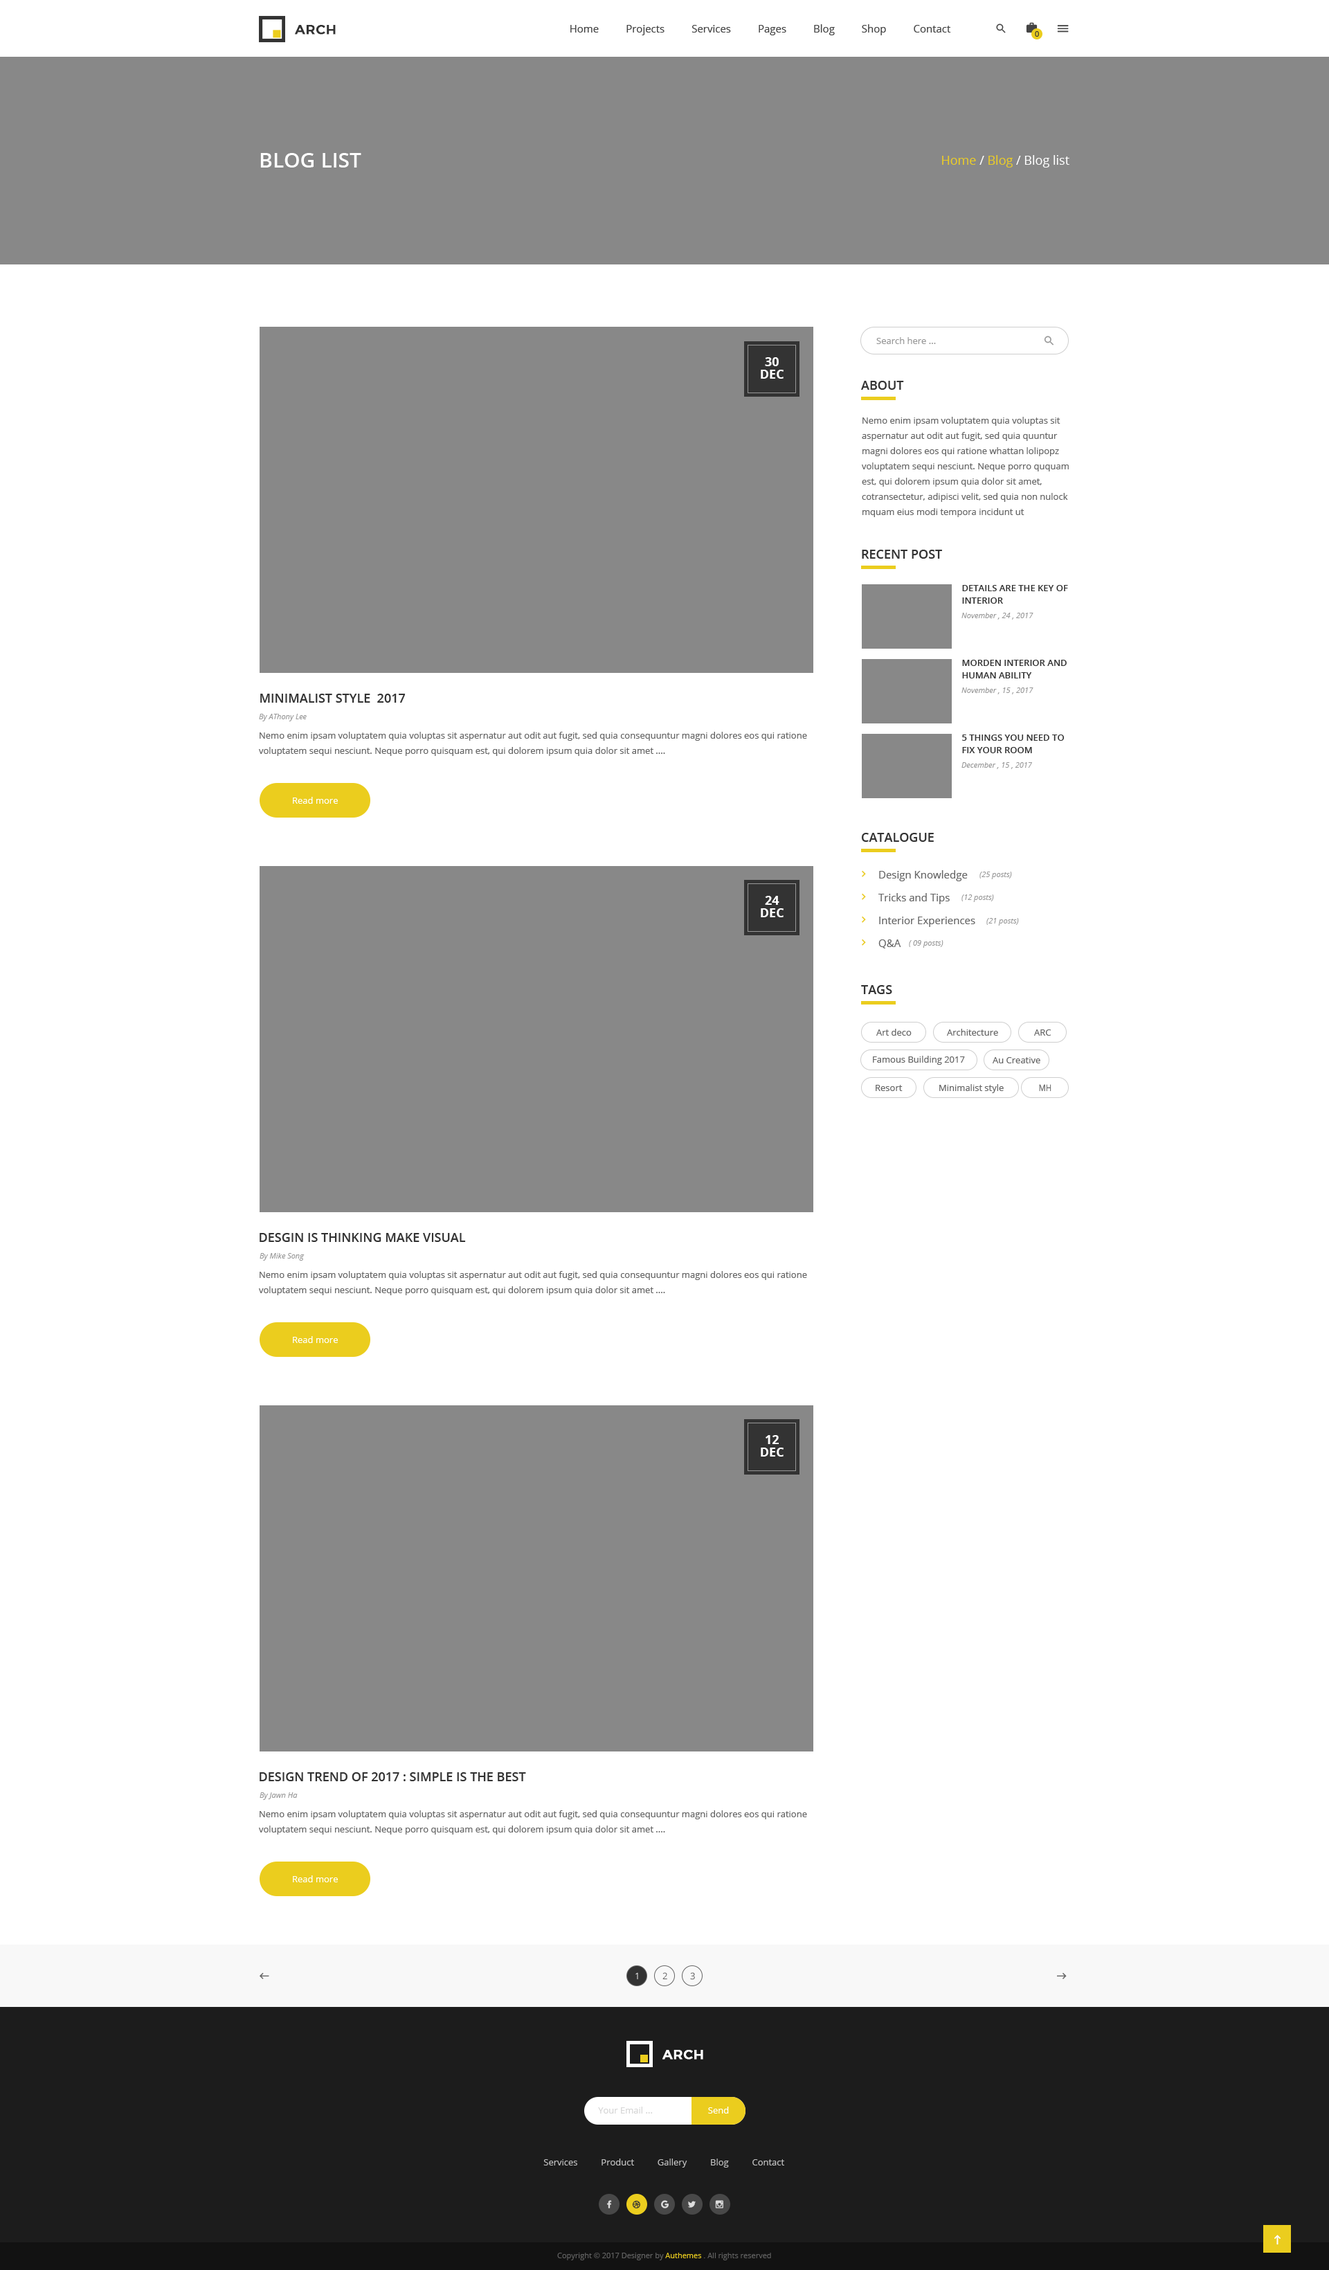
<style>
.page{position:relative;width:1329px;height:2270px;background:#ffffff}
.page>*{position:absolute;margin:0}
.t1{font:13.2px "Montserrat-Medium";letter-spacing:0.025em;color:#333333;text-transform:uppercase;font-weight:bold}
.t2{font:10.4px "OpenSans";color:#444444}
.t3{font:7.6px "OpenSans";color:#333333}
.t4{font:20.8px "OpenSans-Semibold";color:#ffffff;text-transform:uppercase}
.t5{font:12.5px "OpenSans-Regular";color:#ffffff}
.t6{font:12.5px "OpenSans-Regular";color:#ebcd1e}
.t7{font:9px "OpenSans";color:#999999}
.t8{font:12.5px/12.5px "OpenSans-Bold";color:#ffffff;text-transform:uppercase}
.t9{font:12.5px "OpenSans-Semibold";color:#333333;text-transform:uppercase}
.t10{font:9px/15.2px "OpenSans";color:#666666}
.t11{font:9px/12.5px "OpenSans-Semibold";color:#333333;text-transform:uppercase}
.t12{font:7.6px "OpenSans-Italic";color:#999999}
.t13{font:9px "OpenSans";color:#ffffff}
.t14{font:10.4px "OpenSans";color:#666666}
.t15{font:9px "OpenSans";color:#666666}
.t16{font:9px "OpenSans";color:#666666;scale:0.88 1}
.t17{font:13.2px "Montserrat-Medium";letter-spacing:0.025em;color:#ffffff;text-transform:uppercase;font-weight:bold}
.t18{font:9px "OpenSans";color:#d6d6d6}
.t19{font:9px "OpenSans";color:#c2c2c2}
.t20{font:7.6px "OpenSans";color:#626262}
.t21{font:7.6px "OpenSans";color:#ebcd1e}
</style>
<div class="page">
<p class="t1" style="left:295px;top:25px;width:41px;height:10px">arch</p>
<p class="t2" style="left:570px;top:24px;width:381px;height:11px">Home          Projects          Services          Pages          Blog          Shop          Contact</p>
<p class="t3" style="left:1035px;top:31px;width:4px;height:6px">0</p>
<p class="t4" style="left:260px;top:153px;width:101px;height:15px">blog list</p>
<p class="t5" style="left:942px;top:155px;width:128px;height:13px"><span class="t6">Home </span>/<span class="t6"> Blog </span>/ Blog list</p>
<p class="t7" style="left:876px;top:337px;width:60px;height:7px">Search here ...</p>
<p class="t8" style="left:761px;top:357px;width:23px;height:22px;text-align:center">30<br>dec</p>
<p class="t9" style="left:861px;top:381px;width:43px;height:9px">About</p>
<p class="t10" style="left:862px;top:417px;width:207px;height:100px">Nemo enim ipsam voluptatem quia voluptas sit aspernatur aut odit aut fugit, sed quia quuntur magni dolores eos qui ratione whattan lolipopz voluptatem sequi nesciunt. Neque porro ququam est, qui dolorem ipsum quia dolor sit amet, cotransectetur, adipisci velit, sed quia non nulock mquam eius modi tempora incidunt ut</p>
<p class="t9" style="left:862px;top:550px;width:80px;height:9px">Recent Post</p>
<p class="t11" style="left:962px;top:585px;width:106px;height:19px">details are the key of interior</p>
<p class="t12" style="left:962px;top:613px;width:72px;height:7px">November , 24 , 2017</p>
<p class="t11" style="left:962px;top:660px;width:105px;height:18px">morden interior and human ability</p>
<p class="t12" style="left:962px;top:687px;width:72px;height:7px">November , 15 , 2017</p>
<p class="t9" style="left:260px;top:694px;width:146px;height:9px">Minimalist style  2017</p>
<p class="t12" style="left:259px;top:714px;width:48px;height:7px">By AThony Lee</p>
<p class="t10" style="left:259px;top:732px;width:548px;height:24px">Nemo enim ipsam voluptatem quia voluptas sit aspernatur aut odit aut fugit, sed quia consequuntur magni dolores eos qui ratione voluptatem sequi nesciunt. Neque porro quisquam est, qui dolorem ipsum quia dolor sit amet ....</p>
<p class="t11" style="left:962px;top:735px;width:103px;height:18px">5 things you need to fix your room</p>
<p class="t12" style="left:962px;top:762px;width:70px;height:7px">December , 15 , 2017</p>
<p class="t13" style="left:293px;top:797px;width:45px;height:7px">Read more</p>
<p class="t9" style="left:861px;top:833px;width:73px;height:9px">Catalogue</p>
<p class="t14" style="left:879px;top:870px;width:89px;height:11px">Design Knowledge</p>
<p class="t12" style="left:980px;top:872px;width:32px;height:7px">(25 posts)</p>
<p class="t14" style="left:879px;top:893px;width:71px;height:11px">Tricks and Tips</p>
<p class="t8" style="left:761px;top:896px;width:23px;height:21px;text-align:center">24<br>dec</p>
<p class="t12" style="left:962px;top:894px;width:32px;height:8px">(12 posts)</p>
<p class="t14" style="left:879px;top:917px;width:96px;height:10px">Interior Experiences</p>
<p class="t12" style="left:987px;top:918px;width:32px;height:8px">(21 posts)</p>
<p class="t14" style="left:879px;top:939px;width:22px;height:9px">Q&amp;A</p>
<p class="t12" style="left:909px;top:940px;width:35px;height:8px">( 09 posts)</p>
<p class="t9" style="left:861px;top:985px;width:31px;height:9px">Tags</p>
<p class="t15" style="left:876px;top:1029px;width:36px;height:7px">Art deco</p>
<p class="t15" style="left:947px;top:1029px;width:51px;height:7px">Architecture</p>
<p class="t15" style="left:1034px;top:1029px;width:18px;height:7px">ARC</p>
<p class="t15" style="left:873px;top:1056px;width:92px;height:9px">Famous Building 2017</p>
<p class="t15" style="left:993px;top:1057px;width:48px;height:6px">Au Creative</p>
<p class="t15" style="left:876px;top:1085px;width:27px;height:6px">Resort</p>
<p class="t15" style="left:939px;top:1084px;width:65px;height:9px">Minimalist style</p>
<p class="t16" style="left:1039px;top:1084px;width:13px;height:8px">MH</p>
<p class="t9" style="left:260px;top:1233px;width:206px;height:9px">Desgin is thinking make visual</p>
<p class="t12" style="left:260px;top:1253px;width:45px;height:8px">By Mike Song</p>
<p class="t10" style="left:259px;top:1271px;width:548px;height:24px">Nemo enim ipsam voluptatem quia voluptas sit aspernatur aut odit aut fugit, sed quia consequuntur magni dolores eos qui ratione voluptatem sequi nesciunt. Neque porro quisquam est, qui dolorem ipsum quia dolor sit amet ....</p>
<p class="t13" style="left:293px;top:1336px;width:45px;height:7px">Read more</p>
<p class="t8" style="left:761px;top:1435px;width:23px;height:22px;text-align:center">12<br>dec</p>
<p class="t9" style="left:260px;top:1772px;width:266px;height:9px">Design trend of 2017 : Simple is the best</p>
<p class="t12" style="left:260px;top:1792px;width:38px;height:8px">By Jawn Ha</p>
<p class="t10" style="left:259px;top:1810px;width:548px;height:25px">Nemo enim ipsam voluptatem quia voluptas sit aspernatur aut odit aut fugit, sed quia consequuntur magni dolores eos qui ratione voluptatem sequi nesciunt. Neque porro quisquam est, qui dolorem ipsum quia dolor sit amet ....</p>
<p class="t13" style="left:293px;top:1875px;width:45px;height:7px">Read more</p>
<p class="t13" style="left:636px;top:1972px;width:2px;height:7px">1</p>
<p class="t15" style="left:663px;top:1972px;width:4px;height:7px">2</p>
<p class="t15" style="left:690px;top:1972px;width:5px;height:8px">3</p>
<p class="t17" style="left:663px;top:2050px;width:40px;height:10px">arch</p>
<p class="t18" style="left:598px;top:2107px;width:55px;height:7px">Your Email ...</p>
<p class="t13" style="left:708px;top:2107px;width:21px;height:7px">Send</p>
<p class="t19" style="left:543px;top:2159px;width:241px;height:9px">Services          Product          Gallery          Blog          Contact</p>
<p class="t20" style="left:557px;top:2253px;width:214px;height:7px">Copyright © 2017 Designer by <span class="t21">Authemes </span>. All rights reserved</p>
</div>
